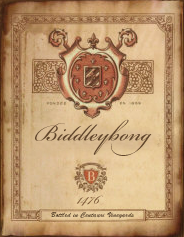
<style>
.page{position:relative;width:184px;height:237px}
.page>*{position:absolute;margin:0}
.t1{font:36px "BickhamScriptPro-Regular";color:#60452b}
.t2{font:24px "BickhamScriptPro-Regular";color:#7e5a38}
.t3{font:7px "BrushScriptStd";color:#4a3521}
</style>
<div class="page">
<p class="t1" style="left:35px;top:119px;width:117px;height:37px">Biddleybong</p>
<p class="t2" style="left:76px;top:195px;width:27px;height:11px">1476</p>
<p class="t3" style="left:51px;top:212px;width:83px;height:7px">Bottled in Centauri Vineyards</p>
</div>
